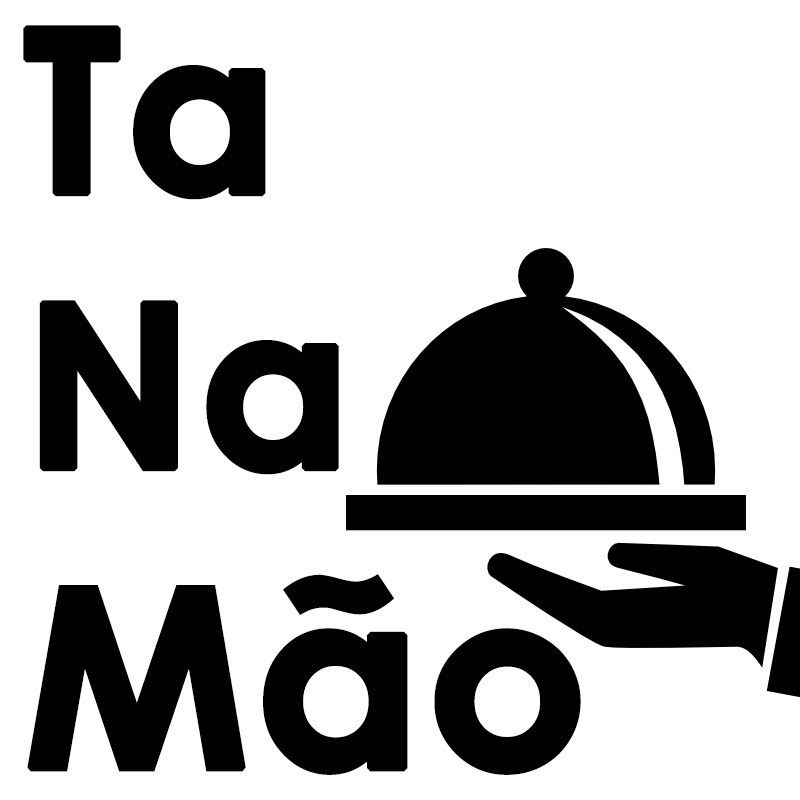
<style>
.page{position:relative;width:800px;height:800px;background:#ffffff}
.page>*{position:absolute;margin:0}
.t1{font:229.2px "CenturyGothic-Bold";color:#000000;font-weight:bold}
.t2{font:250px "CenturyGothic-Bold";color:#000000;font-weight:bold}
</style>
<div class="page">
<p class="t1" style="left:23px;top:25px;width:558px;height:750px">Ta<br>Na<br><span class="t2">Mão</span></p>
</div>
